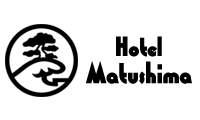
<style>
.page{position:relative;width:200px;height:120px;background:#ffffff}
.page>*{position:absolute;margin:0}
.t1{font:29.3px "WashingtonD-Blac";color:#000000}
.t2{font:32.6px "WashingtonD-Blac";color:#000000}
</style>
<div class="page">
<p class="t1" style="left:116px;top:36px;width:46px;height:21px">Hotel</p>
<p class="t2" style="left:85px;top:61px;width:108px;height:23px">Matushima</p>
</div>
